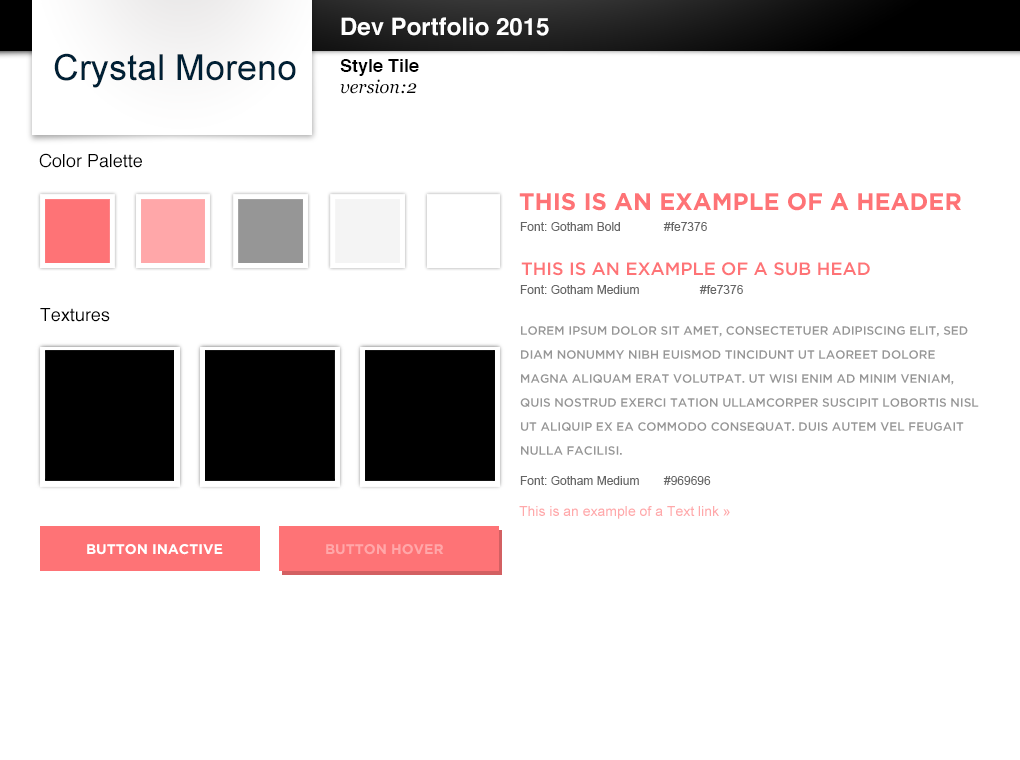
<style>
.page{position:relative;width:1020px;height:760px;background:#ffffff}
.page>*{position:absolute;margin:0}
.t1{font:24px "Helvetica-Bold";color:#ffffff}
.t2{font:36px "ArialMT";color:#002035}
.t3{font:18px "Helvetica-Bold";color:#000000}
.t4{font:18px "Georgia-Italic";color:#000000}
.t5{font:18px "Helvetica";color:#000000}
.t6{font:24px "Gotham-Bold";color:#fe7376;text-transform:uppercase}
.t7{font:12px "ArialMT";color:#666666}
.t8{font:18px "Gotham-Medium";color:#fe7376;text-transform:uppercase}
.t9{font:12px/24px "Gotham-Medium";color:#969696;text-transform:uppercase}
.t10{font:14px "ArialMT";color:#ffa8aa}
.t11{font:14px "Gotham-Bold";color:#ffffff}
.t12{font:14px "Gotham-Bold";color:#ffa7a9}
</style>
<div class="page">
<p class="t1" style="left:341px;top:17px;width:208px;height:19px">Dev Portfolio 2015</p>
<p class="t2" style="left:54px;top:53px;width:242px;height:35px">Crystal Moreno</p>
<p class="t3" style="left:340px;top:59px;width:79px;height:17px">Style Tile</p>
<p class="t4" style="left:340px;top:79px;width:77px;height:15px">version:2</p>
<p class="t5" style="left:39px;top:153px;width:103px;height:15px">Color Palette</p>
<p class="t6" style="left:519px;top:193px;width:442px;height:18px">This is an Example of a Header</p>
<p class="t7" style="left:520px;top:222px;width:187px;height:9px">Font: Gotham Bold  #fe7376</p>
<p class="t8" style="left:521px;top:262px;width:349px;height:14px">This is an Example of a Sub Head</p>
<p class="t7" style="left:520px;top:285px;width:223px;height:9px">Font: Gotham Medium  #fe7376</p>
<p class="t5" style="left:40px;top:308px;width:70px;height:14px">Textures</p>
<p class="t9" style="left:520px;top:326px;width:459px;height:129px">Lorem ipsum dolor sit amet, consectetuer adipiscing elit, sed diam nonummy nibh euismod tincidunt ut laoreet dolore magna aliquam erat volutpat. Ut wisi enim ad minim veniam, quis nostrud exerci tation ullamcorper suscipit lobortis nisl ut aliquip ex ea commodo consequat. Duis autem vel feugait nulla facilisi.</p>
<p class="t7" style="left:520px;top:476px;width:191px;height:9px">Font: Gotham Medium #969696</p>
<p class="t10" style="left:519px;top:506px;width:211px;height:13px">This is an example of a Text link »</p>
<p class="t11" style="left:87px;top:544px;width:136px;height:11px">BUTTON INACTIVE</p>
<p class="t12" style="left:326px;top:544px;width:118px;height:11px">BUTTON HOVER</p>
</div>
